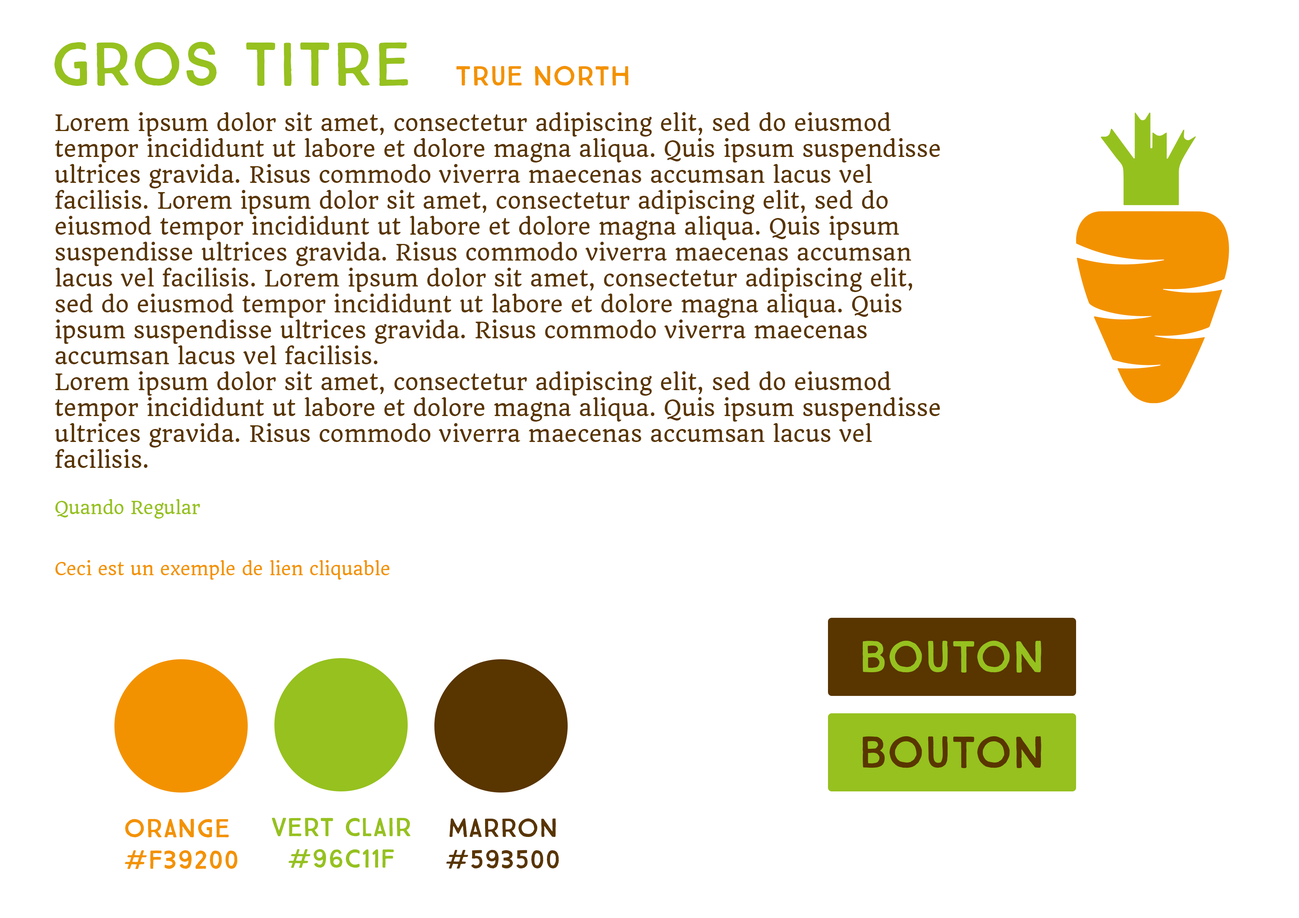
<style>
.page{position:relative;width:1299px;height:918px;background:#ffffff}
.page>*{position:absolute;margin:0}
.t1{font:61.7px "TrueNorth-Regular";color:#96c11f}
.t2{font:27.8px "TrueNorth-Regular";color:#f39200}
.t3{font:21.6px "Quando-Regular";color:#593500}
.t4{font:17px "Quando-Regular";color:#96c11f}
.t5{font:17px "Quando-Regular";color:#f39200}
.t6{font:44.7px "TrueNorth-Regular";color:#96c11f}
.t7{font:44.7px "TrueNorth-Regular";color:#593500}
.t8{font:26.2px "TrueNorth-Regular";color:#f39200}
.t9{font:26.2px "TrueNorth-Regular";color:#96c11f}
.t10{font:26.2px "TrueNorth-Regular";color:#593500}
</style>
<div class="page">
<p class="t1" style="left:54px;top:42px;width:574px;height:44px">Gros titre  <span class="t2">True North</span></p>
<p class="t3" style="left:55px;top:112px;width:885px;height:468px">Lorem ipsum dolor sit amet, consectetur adipiscing elit, sed do eiusmod tempor incididunt ut labore et dolore magna aliqua. Quis ipsum suspendisse ultrices gravida. Risus commodo viverra maecenas accumsan lacus vel facilisis. Lorem ipsum dolor sit amet, consectetur adipiscing elit, sed do eiusmod tempor incididunt ut labore et dolore magna aliqua. Quis ipsum suspendisse ultrices gravida. Risus commodo viverra maecenas accumsan lacus vel facilisis. Lorem ipsum dolor sit amet, consectetur adipiscing elit, sed do eiusmod tempor incididunt ut labore et dolore magna aliqua. Quis ipsum suspendisse ultrices gravida. Risus commodo viverra maecenas accumsan lacus vel facilisis.<br>Lorem ipsum dolor sit amet, consectetur adipiscing elit, sed do eiusmod tempor incididunt ut labore et dolore magna aliqua. Quis ipsum suspendisse ultrices gravida. Risus commodo viverra maecenas accumsan lacus vel facilisis. <br><br><span class="t4">Quando Regular<br></span><span class="t5"><br><br>Ceci est un exemple de lien cliquable</span></p>
<p class="t6" style="left:862px;top:640px;width:179px;height:33px">Bouton</p>
<p class="t7" style="left:862px;top:736px;width:179px;height:32px"><span class="t6"><br></span>Bouton</p>
<p class="t8" style="left:125px;top:819px;width:112px;height:50px;text-align:center">Orange <br>#f39200</p>
<p class="t9" style="left:272px;top:818px;width:139px;height:50px;text-align:center">vert clair<br>#96c11f</p>
<p class="t10" style="left:446px;top:819px;width:113px;height:50px;text-align:center">marron<br>#593500</p>
</div>
